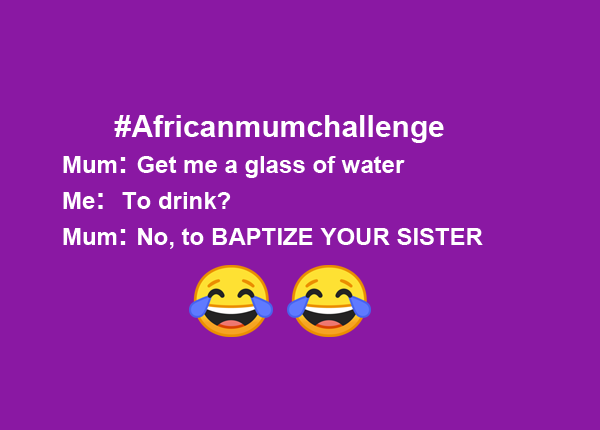
<style>
.page{position:relative;width:600px;height:430px;background:#8a18a3}
.page>*{position:absolute;margin:0}
.t1{font:24px "Arial-BoldMT";color:#ffffff}
.t2{font:30px "Arial-BoldMT";color:#ffffff}
</style>
<div class="page">
<p class="t1" style="left:63px;top:115px;width:420px;height:134px"><span class="t2">   #Africanmumchallenge<br></span>Mum<span class="t2">: </span>Get me a glass of water<br>Me<span class="t2">:  </span>To drink?<br>Mum<span class="t2">: </span>No, to BAPTIZE YOUR SISTER</p>
</div>
